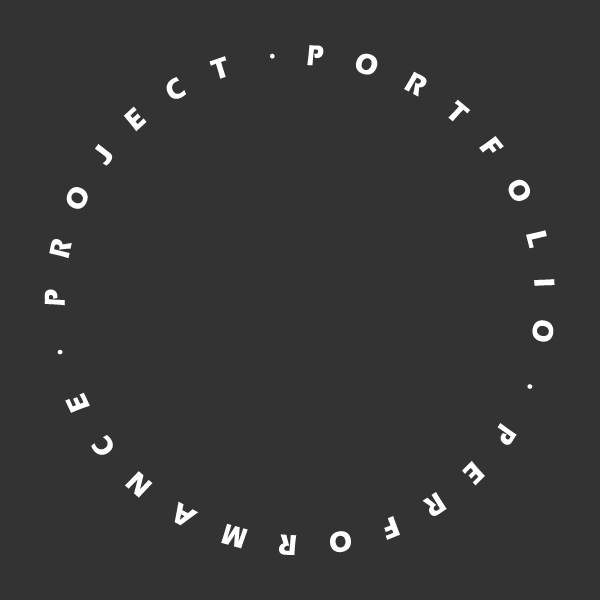
<style>
.page{position:relative;width:600px;height:600px;background:#333333}
.page>*{position:absolute;margin:0}
.t1{font:30px/60.2px "ErasITC-Bold";letter-spacing:1.15em;color:#ffffff;text-transform:uppercase;scale:0.88 1}
.t2{font:30px/60.2px "Gulim";letter-spacing:1.15em;color:#ffffff;text-transform:uppercase;scale:0.88 1}
</style>
<div class="page">
<p class="t1" style="left:44px;top:45px;width:511px;height:511px">portfoliO<span class="t2">ㆍ</span>performance<span class="t2">ㆍ</span>PROJECT<span class="t2">ㆍ</span></p>
</div>
